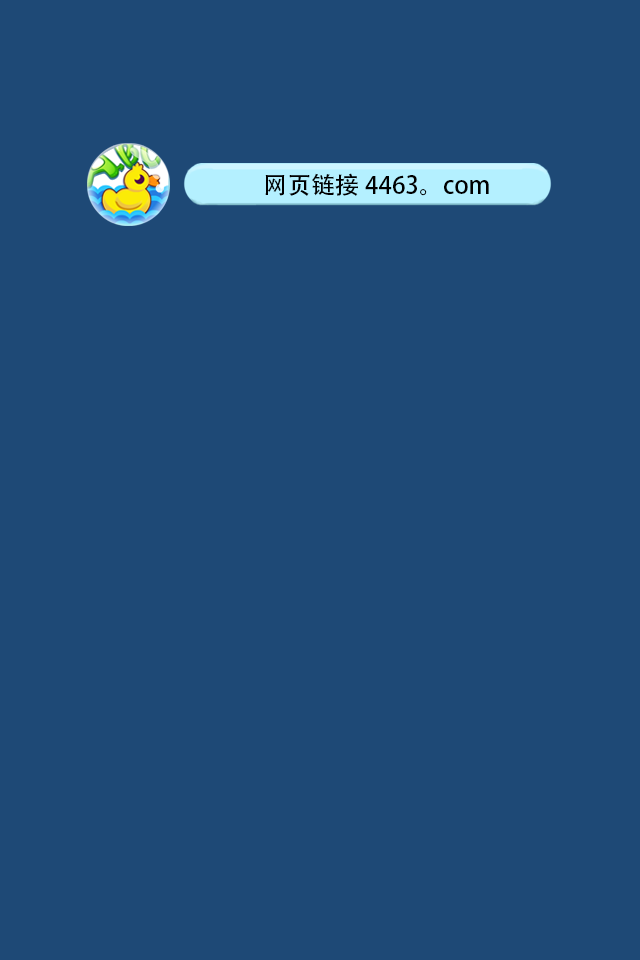
<style>
.page{position:relative;width:640px;height:960px;background:#1e4976}
.page>*{position:absolute;margin:0}
.t1{font:24px "AdobeHeitiStd-Regular";color:#000000}
</style>
<div class="page">
<p class="t1" style="left:265px;top:173px;width:224px;height:23px">网页链接4463。com</p>
</div>
